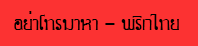
<style>
.page{position:relative;width:198px;height:46px;background:#fc3232}
.page>*{position:absolute;margin:0}
.t1{font:27px "DSNDeCho";color:#000000}
</style>
<div class="page">
<p class="t1" style="left:14px;top:11px;width:165px;height:19px">อย่าโทรมาหา - พริกไทย</p>
</div>
